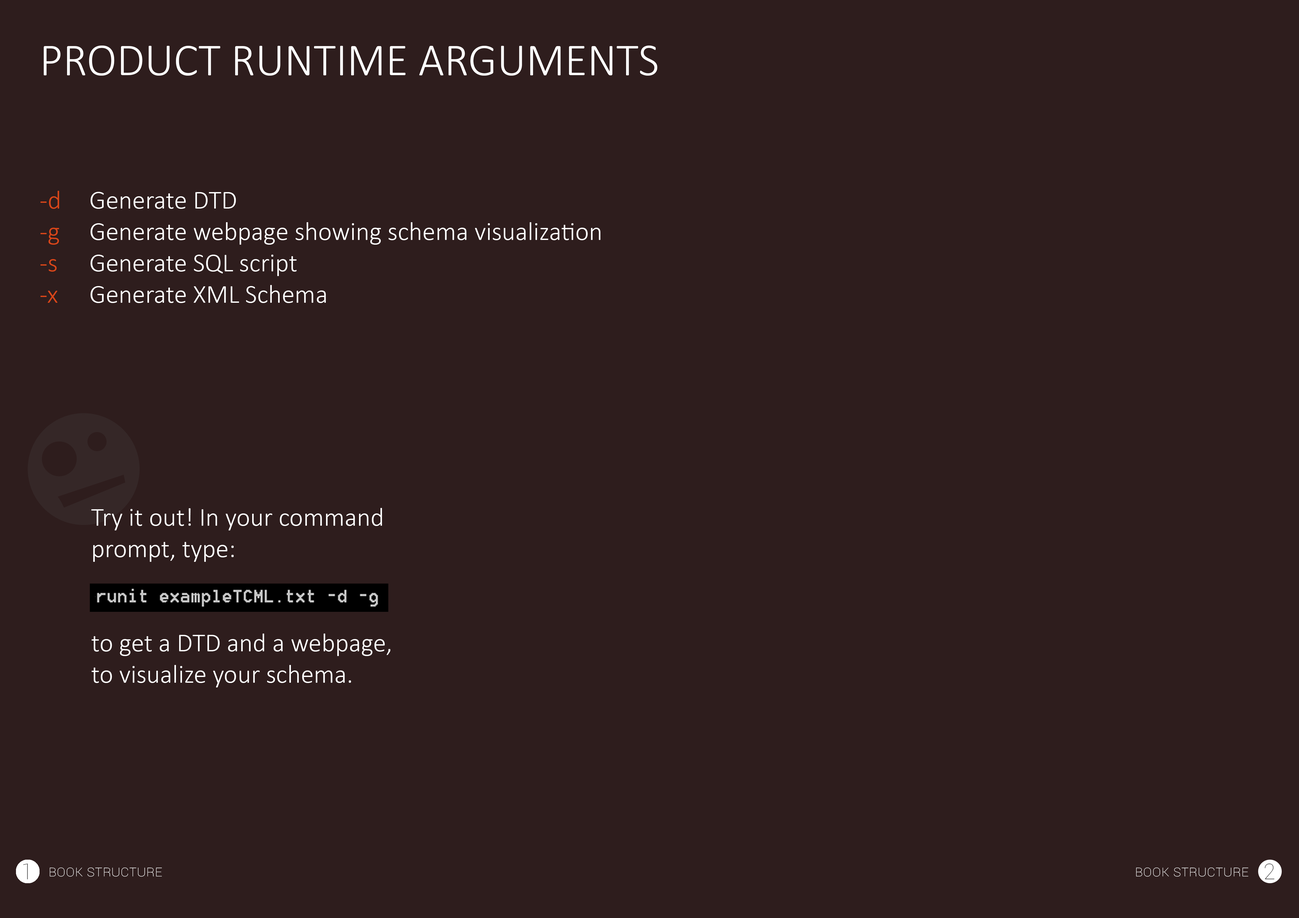
<style>
.page{position:relative;width:1299px;height:918px;background:#2e1d1d}
.page>*{position:absolute;margin:0}
.t1{font:45.8px "Calibri-Light";color:#ffffff;text-transform:uppercase}
.t2{font:26.2px "Calibri-Light";color:#d94619}
.t3{font:26.2px "Calibri-Light";color:#ffffff}
.t4{font:21.8px "Roboto-Thin";color:#484848}
.t5{font:15.3px "Roboto-Thin";color:#ffffff;font-variant:small-caps}
</style>
<div class="page">
<p class="t1" style="left:44px;top:46px;width:613px;height:30px">Product runtime arguments</p>
<p class="t2" style="left:40px;top:191px;width:19px;height:112px">-d<br>-g <br>-s<br>-x</p>
<p class="t3" style="left:90px;top:192px;width:510px;height:111px">Generate DTD<br>Generate webpage showing schema visualization<br>Generate SQL script<br>Generate XML Schema</p>
<p class="t3" style="left:91px;top:508px;width:299px;height:180px">Try it out! In your command prompt, type: <br><br><br>to get a DTD and a webpage, to visualize your schema.</p>
<p class="t4" style="left:23px;top:864px;width:5px;height:16px">1</p>
<p class="t5" style="left:50px;top:868px;width:112px;height:9px">Book structure</p>
<p class="t5" style="left:1136px;top:868px;width:112px;height:9px">Book structure</p>
<p class="t4" style="left:1264px;top:864px;width:10px;height:16px">2</p>
</div>
